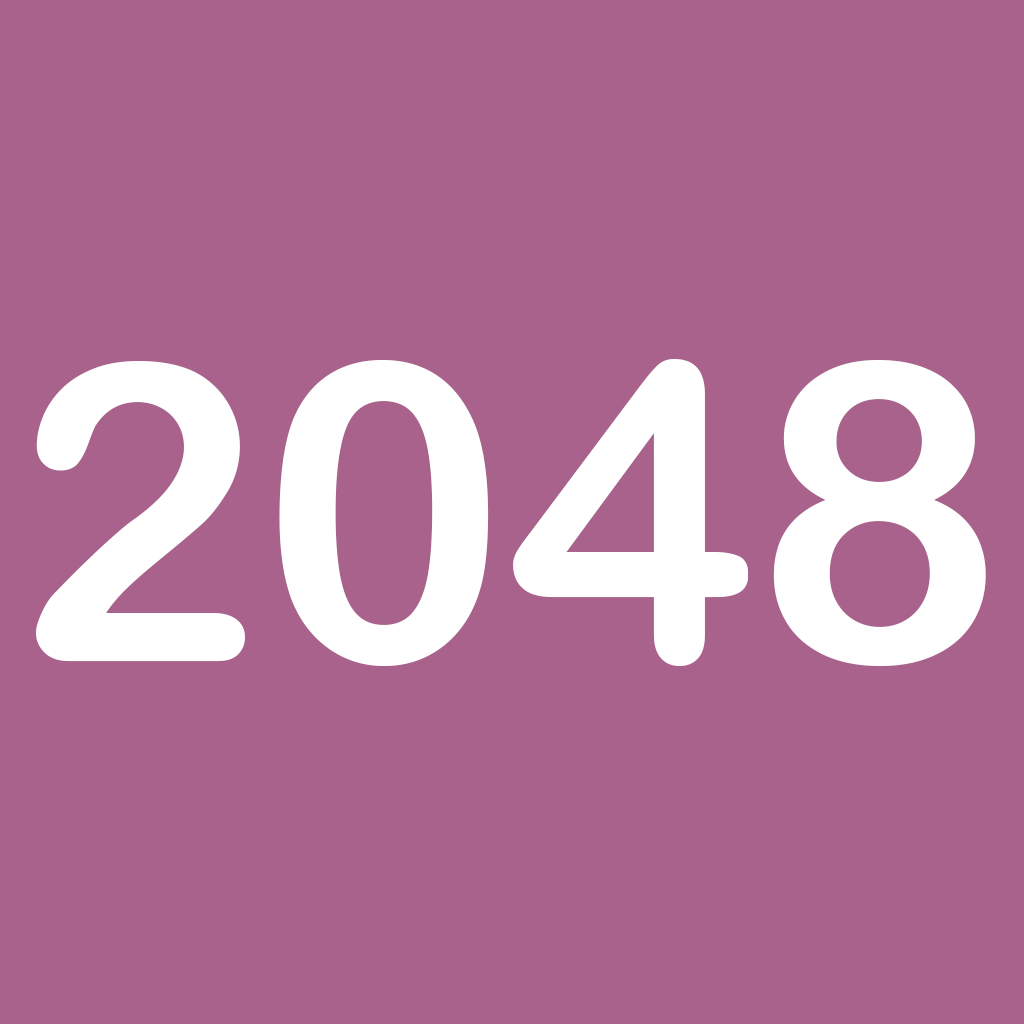
<style>
.page{position:relative;width:1024px;height:1024px;background:#a8628b}
.page>*{position:absolute;margin:0}
.t1{font:416.7px "ArialRoundedMTBold";color:#ffffff}
</style>
<div class="page">
<p class="t1" style="left:36px;top:359px;width:950px;height:307px">2048</p>
</div>
